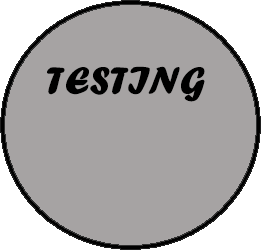
<style>
.page{position:relative;width:261px;height:250px;background:#a6a3a3}
.page>*{position:absolute;margin:0}
.t1{font:40px "ForteMT";color:#000000}
</style>
<div class="page">
<p class="t1" style="left:47px;top:66px;width:158px;height:36px">TESTING</p>
</div>
